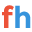
<style>
.page{position:relative;width:32px;height:32px;background:#ffffff}
.page>*{position:absolute;margin:0}
.t1{font:30px "Montserrat-Bold";letter-spacing:-0.01em;color:#ec5339}
.t2{font:30px "Montserrat-Bold";letter-spacing:-0.01em;color:#3794dc}
</style>
<div class="page">
<p class="t1" style="left:2px;top:5px;width:29px;height:23px">f<span class="t2">h</span></p>
</div>
